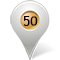
<style>
.page{position:relative;width:60px;height:60px;background:#ffffff}
.page>*{position:absolute;margin:0}
.t1{font:14.1px "TrebuchetMS";color:#000000}
</style>
<div class="page">
<p class="t1" style="left:23px;top:16px;width:15px;height:10px">50</p>
</div>
